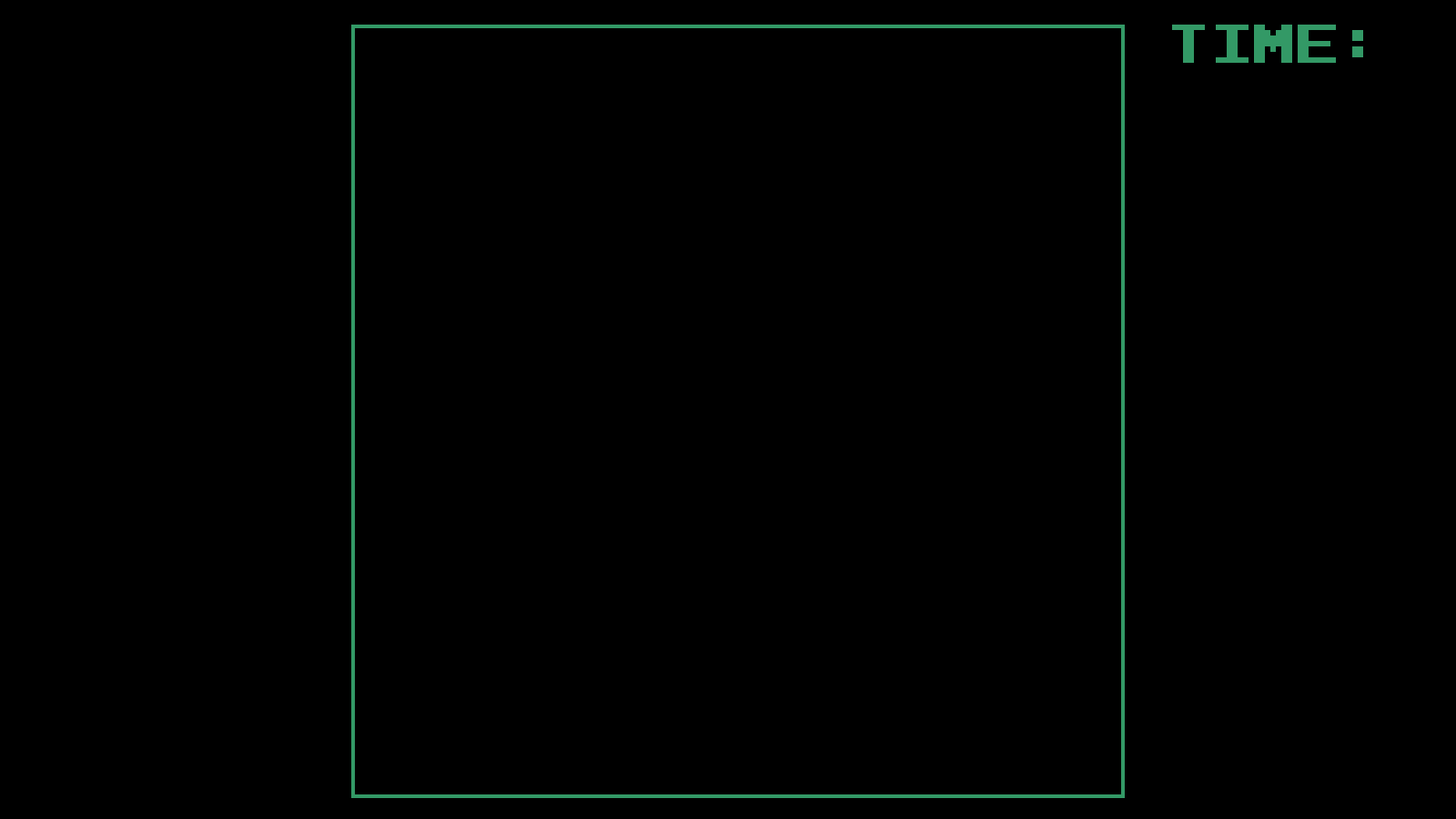
<style>
.page{position:relative;width:1456px;height:819px;background:#000000}
.page>*{position:absolute;margin:0}
.t1{font:43.7px "PressStart2P-Regular";color:#339966}
</style>
<div class="page">
<p class="t1" style="left:1172px;top:25px;width:191px;height:38px">TIME:</p>
</div>
